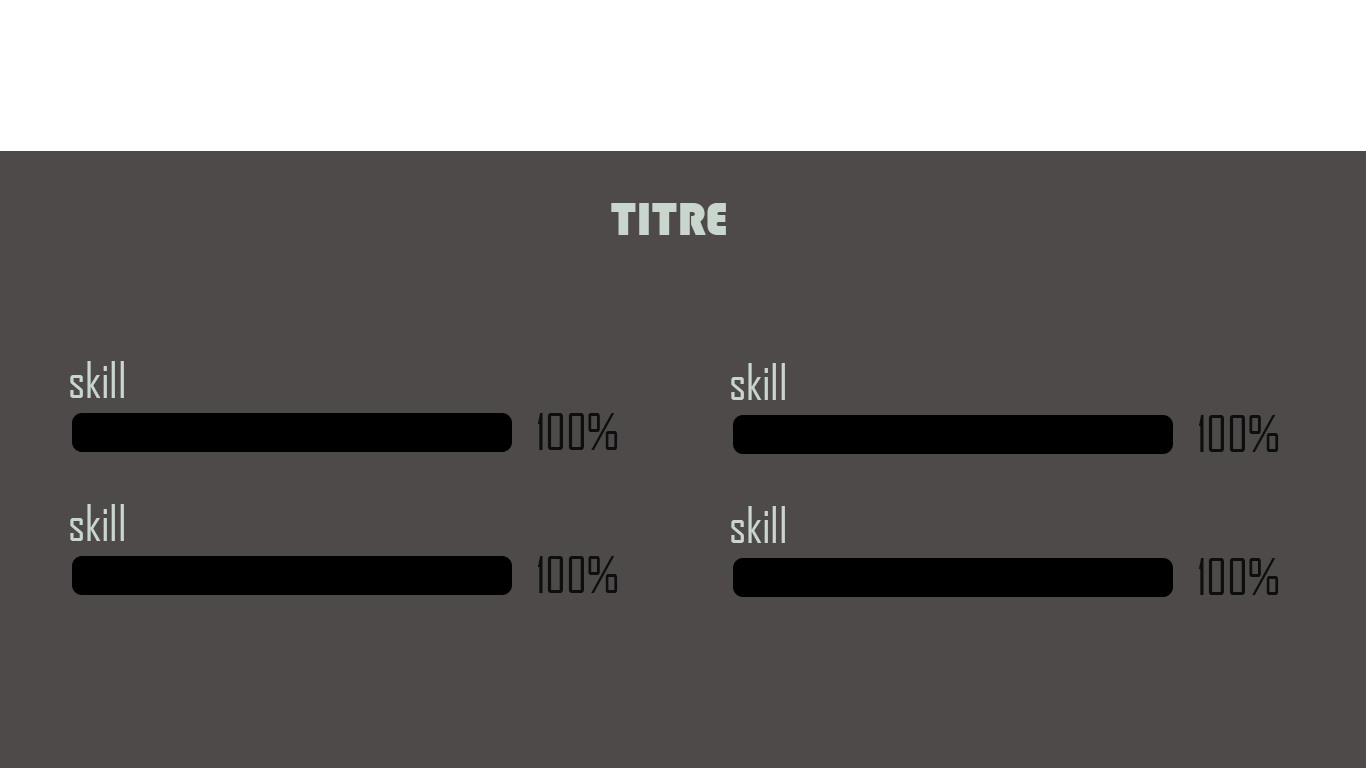
<style>
.page{position:relative;width:1366px;height:768px;background:#4f4a4a}
.page>*{position:absolute;margin:0}
.t1{font:48px "Bauhaus93";color:#c8d6cd}
.t2{font:48px "AgencyFB-Reg";color:#c8d6cd}
.t3{font:48px "AgencyFB-Reg";color:#0d0f0e}
</style>
<div class="page">
<p class="t1" style="left:611px;top:203px;width:115px;height:32px">TITRE</p>
<p class="t2" style="left:70px;top:361px;width:54px;height:37px">skill</p>
<p class="t2" style="left:731px;top:363px;width:54px;height:37px">skill</p>
<p class="t3" style="left:537px;top:413px;width:81px;height:37px">100%</p>
<p class="t3" style="left:1198px;top:415px;width:81px;height:37px">100%</p>
<p class="t2" style="left:70px;top:504px;width:54px;height:37px">skill</p>
<p class="t2" style="left:731px;top:506px;width:54px;height:37px">skill</p>
<p class="t3" style="left:537px;top:556px;width:81px;height:37px">100%</p>
<p class="t3" style="left:1198px;top:558px;width:81px;height:37px">100%</p>
</div>
